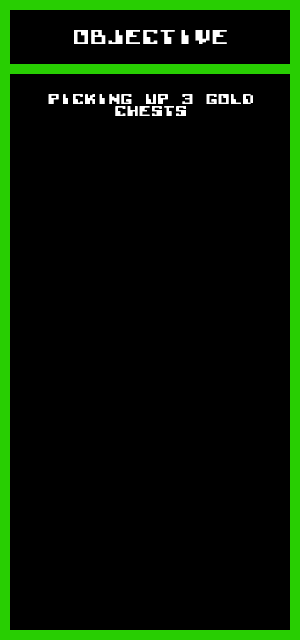
<style>
.page{position:relative;width:300px;height:640px;background:#000000}
.page>*{position:absolute;margin:0}
.t1{font:13.9px "Lode-Runner-(C64)";color:#ffffff}
.t2{font:9.7px "Lode-Runner-(C64)";color:#ffffff}
</style>
<div class="page">
<p class="t1" style="left:74px;top:30px;width:153px;height:14px">OBJECTIVE</p>
<p class="t2" style="left:48px;top:94px;width:205px;height:22px;text-align:center">PICKING UP 3 GOLD <br>CHESTS</p>
</div>
